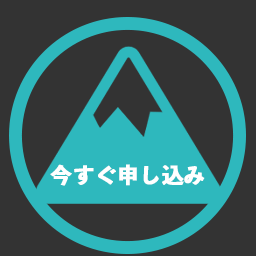
<style>
.page{position:relative;width:256px;height:256px;background:#333333}
.page>*{position:absolute;margin:0}
.t1{font:21.4px "Toppan-BunkyuMidashiGoStd-EB";letter-spacing:0.005em;color:#ffffff;font-weight:bold}
</style>
<div class="page">
<p class="t1" style="left:50px;top:164px;width:155px;height:22px">今すぐ申し込み</p>
</div>
